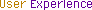
<style>
.page{position:relative;width:92px;height:10px;background:#ffffff}
.page>*{position:absolute;margin:0}
.t1{font:15px "PixelOperator";color:#660099}
.t2{font:15px "PixelOperator";color:#bc8000}
</style>
<div class="page">
<p class="t1" style="left:0px;top:0px;width:92px;height:10px"><span class="t2">User</span> Experience</p>
</div>
